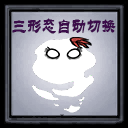
<style>
.page{position:relative;width:128px;height:128px}
.page>*{position:absolute;margin:0}
.t1{font:19.7px "STLiti";color:#3c0d4a;font-variant:small-caps;font-weight:bold;scale:0.74 1}
</style>
<div class="page">
<p class="t1" style="left:12px;top:18px;width:104px;height:16px">三形态自动切换</p>
</div>
